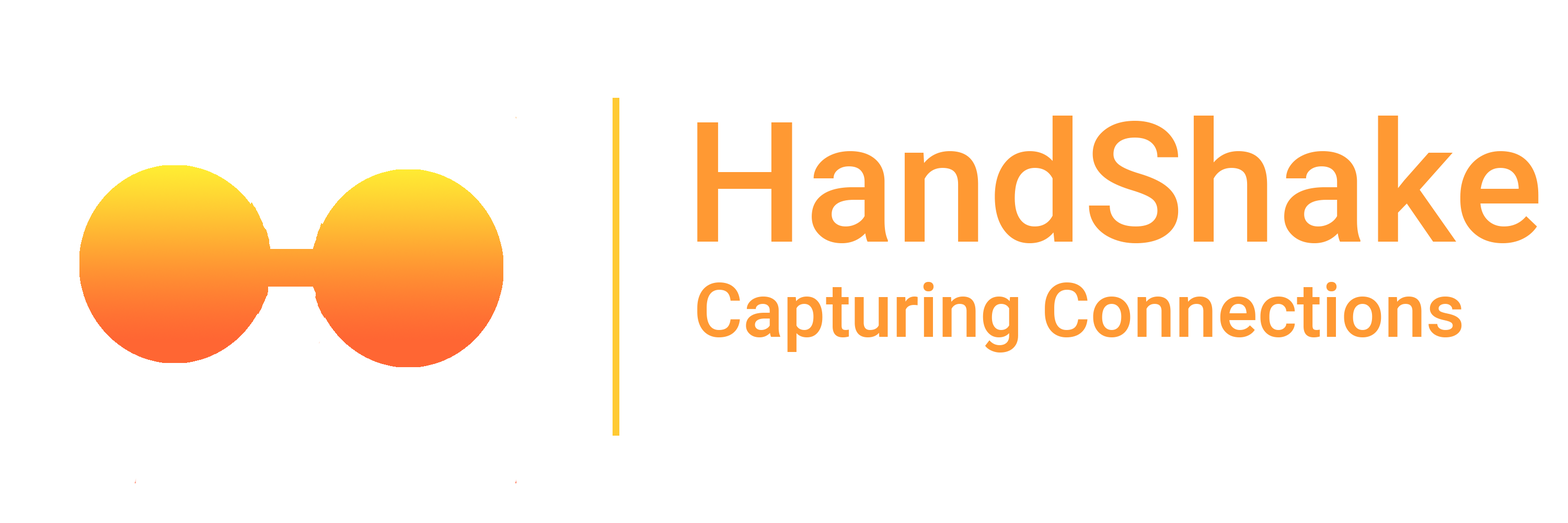
<style>
.page{position:relative;width:1568px;height:523px;background:#ffffff}
.page>*{position:absolute;margin:0}
.t1{font:167.7px "Roboto-Medium";color:#ff9933}
.t2{font:75.3px "Roboto-Medium";color:#ff9933}
</style>
<div class="page">
<p class="t1" style="left:697px;top:116px;width:842px;height:127px">HandShake</p>
<p class="t2" style="left:697px;top:282px;width:765px;height:70px">Capturing Connections</p>
</div>
